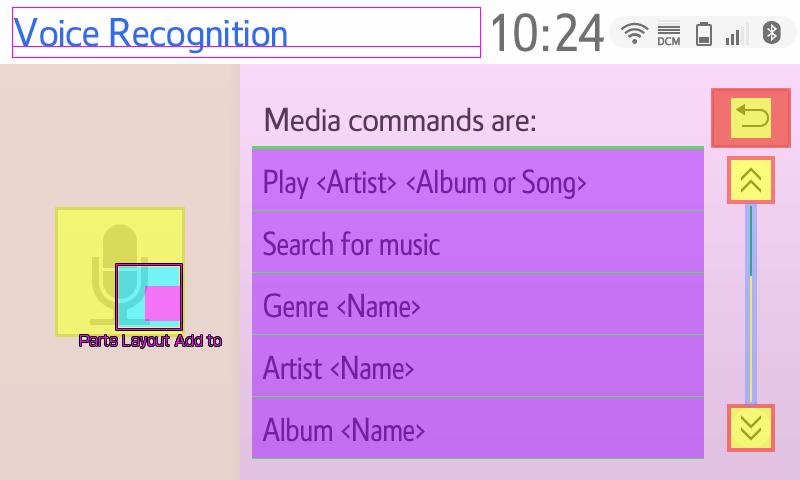
<style>
.page{position:relative;width:800px;height:480px}
.page>*{position:absolute;margin:0}
.t1{font:48px "Tfont1502_T2S";letter-spacing:0.05em;color:#707071}
.t2{font:36px "Tfont1502_T1S";color:#336ce6}
.t3{font:30px "Tfont1502_T1S";color:#583859}
.t4{font:30px "Tfont1502_T2S";color:#7320a0}
.t5{font:14px "ShinGoPro-Regular";color:#ff00ff}
</style>
<div class="page">
<p class="t1" style="left:493px;top:13px;width:111px;height:39px">10:24</p>
<p class="t2" style="left:13px;top:18px;width:274px;height:36px">Voice Recognition</p>
<p class="t3" style="left:265px;top:107px;width:270px;height:25px">Media commands are:</p>
<p class="t4" style="left:264px;top:169px;width:323px;height:30px">Play &lt;Artist&gt; &lt;Album or Song&gt;</p>
<p class="t4" style="left:263px;top:231px;width:177px;height:25px">Search for music</p>
<p class="t4" style="left:264px;top:293px;width:157px;height:25px">Genre &lt;Name&gt;</p>
<p class="t5" style="left:80px;top:335px;width:141px;height:13px">Parts Layout Add to</p>
<p class="t4" style="left:262px;top:355px;width:152px;height:25px">Artist &lt;Name&gt;</p>
<p class="t4" style="left:262px;top:417px;width:163px;height:25px">Album &lt;Name&gt;</p>
</div>
